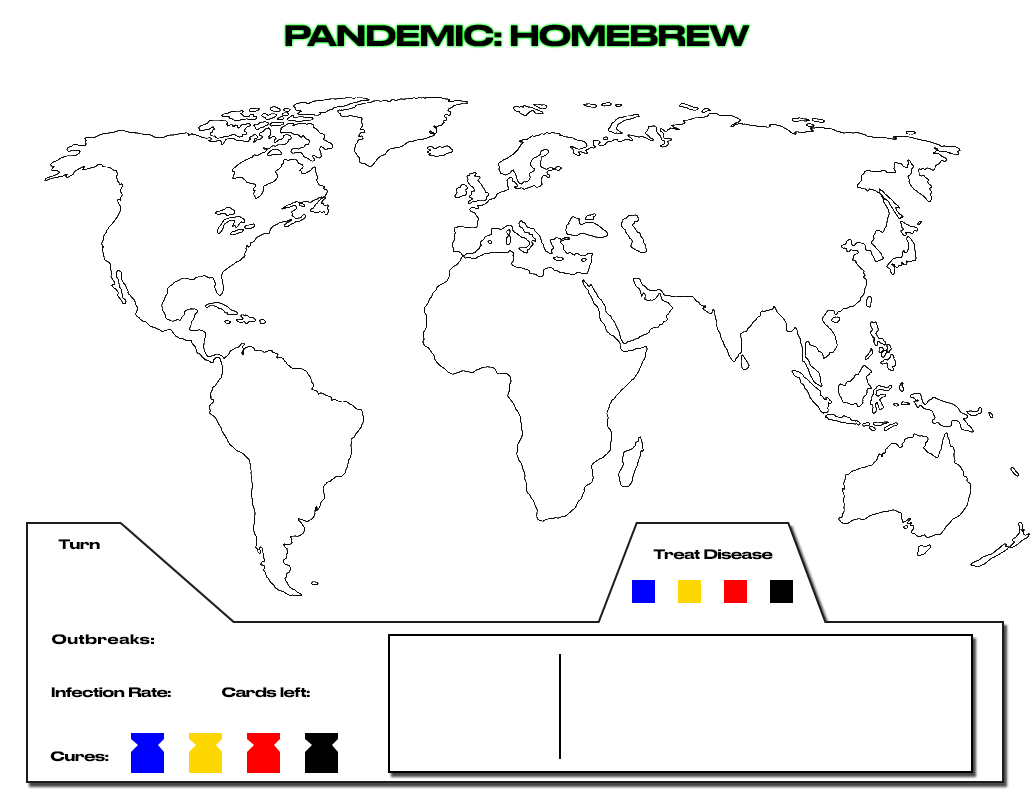
<style>
.page{position:relative;width:1035px;height:800px;background:#ffffff}
.page>*{position:absolute;margin:0}
.t1{font:28px "DrukWide-Medium";letter-spacing:-0.02em;color:#000000}
.t2{font:13px "DrukWide-Medium";letter-spacing:-0.02em;color:#000000}
</style>
<div class="page">
<p class="t1" style="left:285px;top:24px;width:465px;height:23px">PANDEMIC: HOMEBREW</p>
<p class="t2" style="left:58px;top:539px;width:42px;height:11px">Turn</p>
<p class="t2" style="left:653px;top:549px;width:120px;height:11px">Treat Disease</p>
<p class="t2" style="left:52px;top:634px;width:102px;height:11px">Outbreaks:</p>
<p class="t2" style="left:51px;top:687px;width:120px;height:11px">Infection Rate:</p>
<p class="t2" style="left:222px;top:687px;width:88px;height:11px">Cards left:</p>
<p class="t2" style="left:50px;top:751px;width:59px;height:11px">Cures:</p>
</div>
